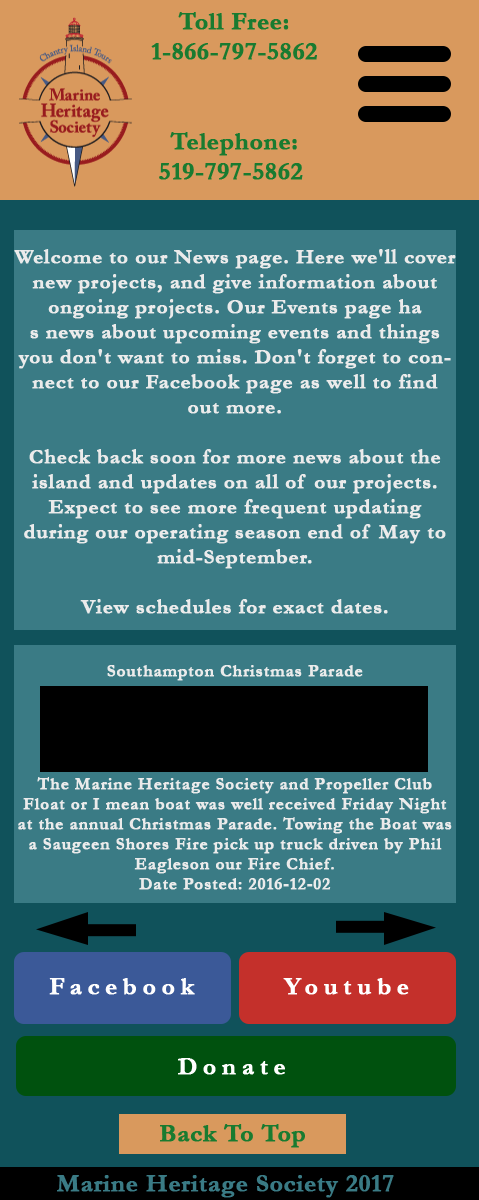
<style>
.page{position:relative;width:479px;height:1200px;background:#3a7b85}
.page>*{position:absolute;margin:0}
.t1{font:25px "Garamond-Bold";color:#197b30;font-weight:bold}
.t2{font:20.8px "Garamond-Bold";color:#ebebeb;font-weight:bold}
.t3{font:16.7px "Garamond-Bold";color:#ebebeb;font-weight:bold}
.t4{font:25px "Garamond-Bold";letter-spacing:0.2em;color:#fefefe;font-weight:bold}
.t5{font:25px "Garamond-Bold";letter-spacing:0.2em;color:#ffffff;font-weight:bold}
.t6{font:25px "Garamond-Bold";color:#3a7b85;font-weight:bold}
</style>
<div class="page">
<p class="t1" style="left:151px;top:12px;width:166px;height:48px;text-align:center">Toll Free:<br>1-866-797-5862</p>
<p class="t1" style="left:159px;top:132px;width:144px;height:48px;text-align:center">Telephone:<br>519-797-5862</p>
<p class="t2" style="left:14px;top:249px;width:442px;height:365px;text-align:center">Welcome to our News page. Here we'll cover new projects, and give information about ongoing projects. Our Events page ha<br>s news about upcoming events and things you don't want to miss. Don't forget to connect to our Facebook page as well to find out more.<br><br>Check back soon for more news about the island and updates on all of our projects. Expect to see more frequent updating during our operating season end of May to mid-September. <br><br>View schedules for exact dates.</p>
<p class="t3" style="left:107px;top:665px;width:256px;height:16px">Southampton Christmas Parade</p>
<p class="t3" style="left:18px;top:777px;width:434px;height:113px;text-align:center"><span class="t2"><br><br><br></span><br><br><br>The Marine Heritage Society and Propeller Club Float or I mean boat was well received Friday Night at the annual Christmas Parade. Towing the Boat was a Saugeen Shores Fire pick up truck driven by Phil Eagleson our Fire Chief.<br>Date Posted: 2016-12-02</p>
<p class="t4" style="left:49px;top:978px;width:146px;height:17px">Facebook</p>
<p class="t5" style="left:283px;top:978px;width:126px;height:17px">Youtube</p>
<p class="t5" style="left:178px;top:1058px;width:107px;height:17px">Donate</p>
<p class="t1" style="left:160px;top:1124px;width:145px;height:24px">Back To Top</p>
<p class="t6" style="left:57px;top:1175px;width:337px;height:23px">Marine Heritage Society 2017</p>
</div>
